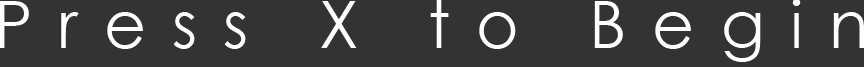
<style>
.page{position:relative;width:864px;height:67px;background:#333333}
.page>*{position:absolute;margin:0}
.t1{font:15.6px "CenturyGothic";letter-spacing:0.4em;color:#ffffff}
</style>
<div class="page">
<p class="t1" style="left:0px;top:0px;width:865px;height:62px;text-align:center">Press X to Begin</p>
</div>
